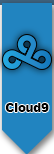
<style>
.page{position:relative;width:54px;height:154px;background:#2184c0}
.page>*{position:absolute;margin:0}
.t1{font:11.7px "Arial-Black";letter-spacing:-0.01em;color:#000000}
</style>
<div class="page">
<p class="t1" style="left:5px;top:103px;width:44px;height:9px">Cloud9</p>
</div>
